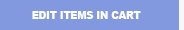
<style>
.page{position:relative;width:184px;height:30px;background:#8299df}
.page>*{position:absolute;margin:0}
.t1{font:18.2px "Arial-Black";color:#ffffff;scale:0.9 1}
</style>
<div class="page">
<p class="t1" style="left:32px;top:11px;width:109px;height:8px">EDIT ITEMS IN CART</p>
</div>
